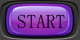
<style>
.page{position:relative;width:80px;height:40px}
.page>*{position:absolute;margin:0}
.t1{font:19px "SimSun";color:#000000}
</style>
<div class="page">
<p class="t1" style="left:17px;top:14px;width:48px;height:14px">START</p>
</div>
